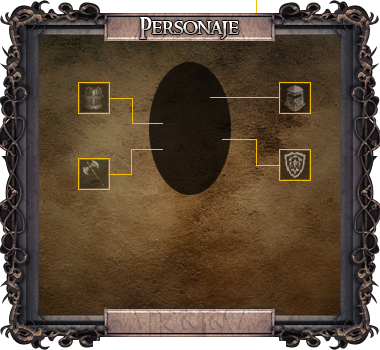
<style>
.page{position:relative;width:380px;height:350px}
.page>*{position:absolute;margin:0}
.t1{font:21px "RingbearerMedium"}
</style>
<div class="page">
<p class="t1" style="left:139px;top:17px;width:100px;height:22px">Personaje</p>
</div>
